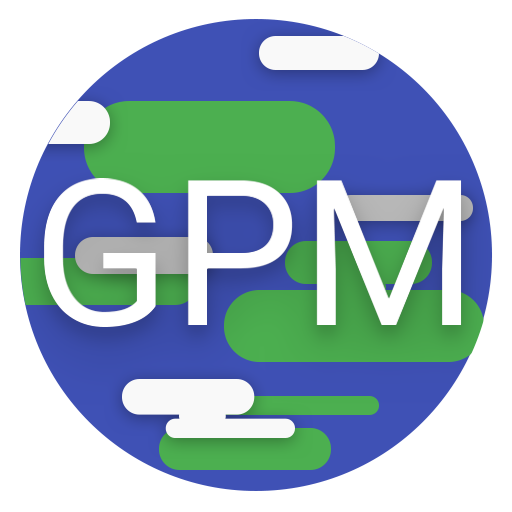
<style>
.page{position:relative;width:512px;height:512px;background:#ffffff}
.page>*{position:absolute;margin:0}
.t1{font:204px "Roboto-Regular";color:#ffffff}
</style>
<div class="page">
<p class="t1" style="left:44px;top:178px;width:418px;height:149px">GPM</p>
</div>
